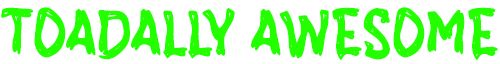
<style>
.page{position:relative;width:500px;height:64px;background:#ffffff}
.page>*{position:absolute;margin:0}
.t1{font:64px "fFrogToad";color:#24ff00;text-transform:uppercase}
</style>
<div class="page">
<p class="t1" style="left:1px;top:7px;width:497px;height:53px">Toadally Awesome</p>
</div>
